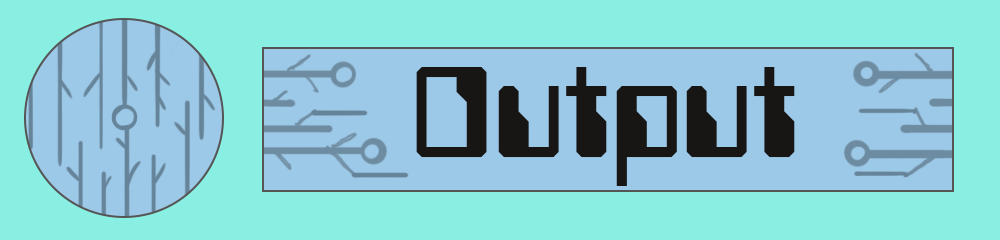
<style>
.page{position:relative;width:1000px;height:240px;background:#8aefe3}
.page>*{position:absolute;margin:0}
.t1{font:150px "Computerfont";color:#171615}
</style>
<div class="page">
<p class="t1" style="left:416px;top:67px;width:379px;height:119px">Output</p>
</div>
